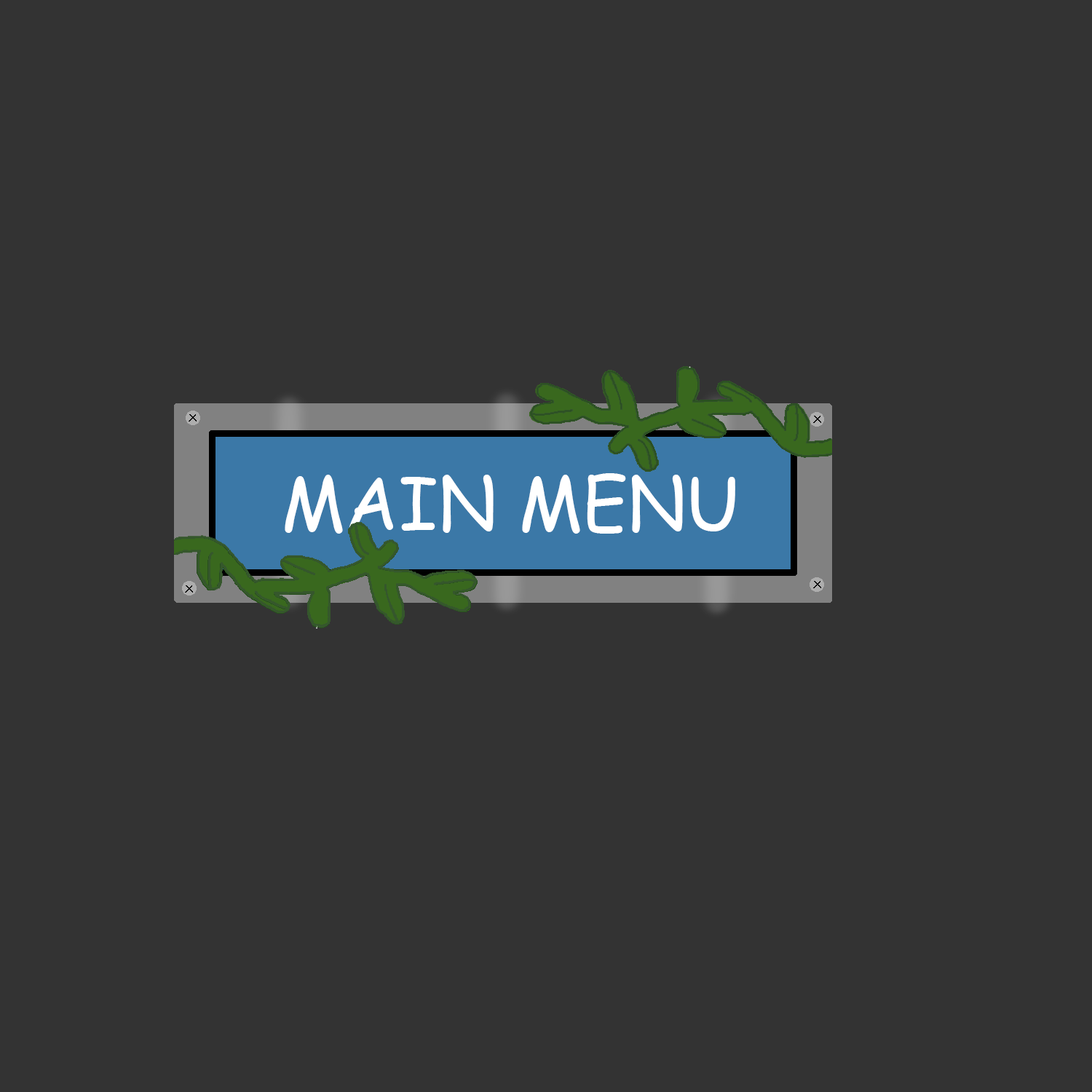
<style>
.page{position:relative;width:1092px;height:1092px;background:#333333}
.page>*{position:absolute;margin:0}
.t1{font:72.8px "ComicSansMS";color:#ffffff}
</style>
<div class="page">
<p class="t1" style="left:285px;top:473px;width:450px;height:61px">MAIN MENU</p>
</div>
